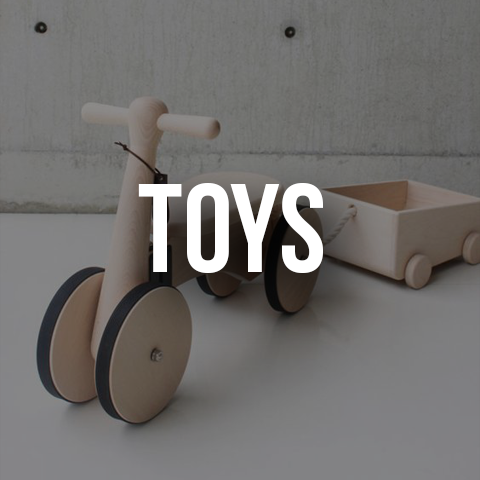
<style>
.page{position:relative;width:480px;height:480px}
.page>*{position:absolute;margin:0}
.t1{font:125px "BebasNeue";color:#ffffff}
</style>
<div class="page">
<p class="t1" style="left:138px;top:183px;width:185px;height:90px">toys</p>
</div>
